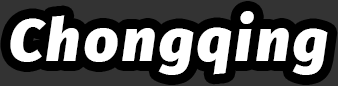
<style>
.page{position:relative;width:338px;height:86px;background:#000000}
.page>*{position:absolute;margin:0}
.t1{font:60px "FiraSans-BlackItalic";letter-spacing:0.06em;color:#ffffff}
</style>
<div class="page">
<p class="t1" style="left:10px;top:11px;width:318px;height:64px">Chongqing</p>
</div>
